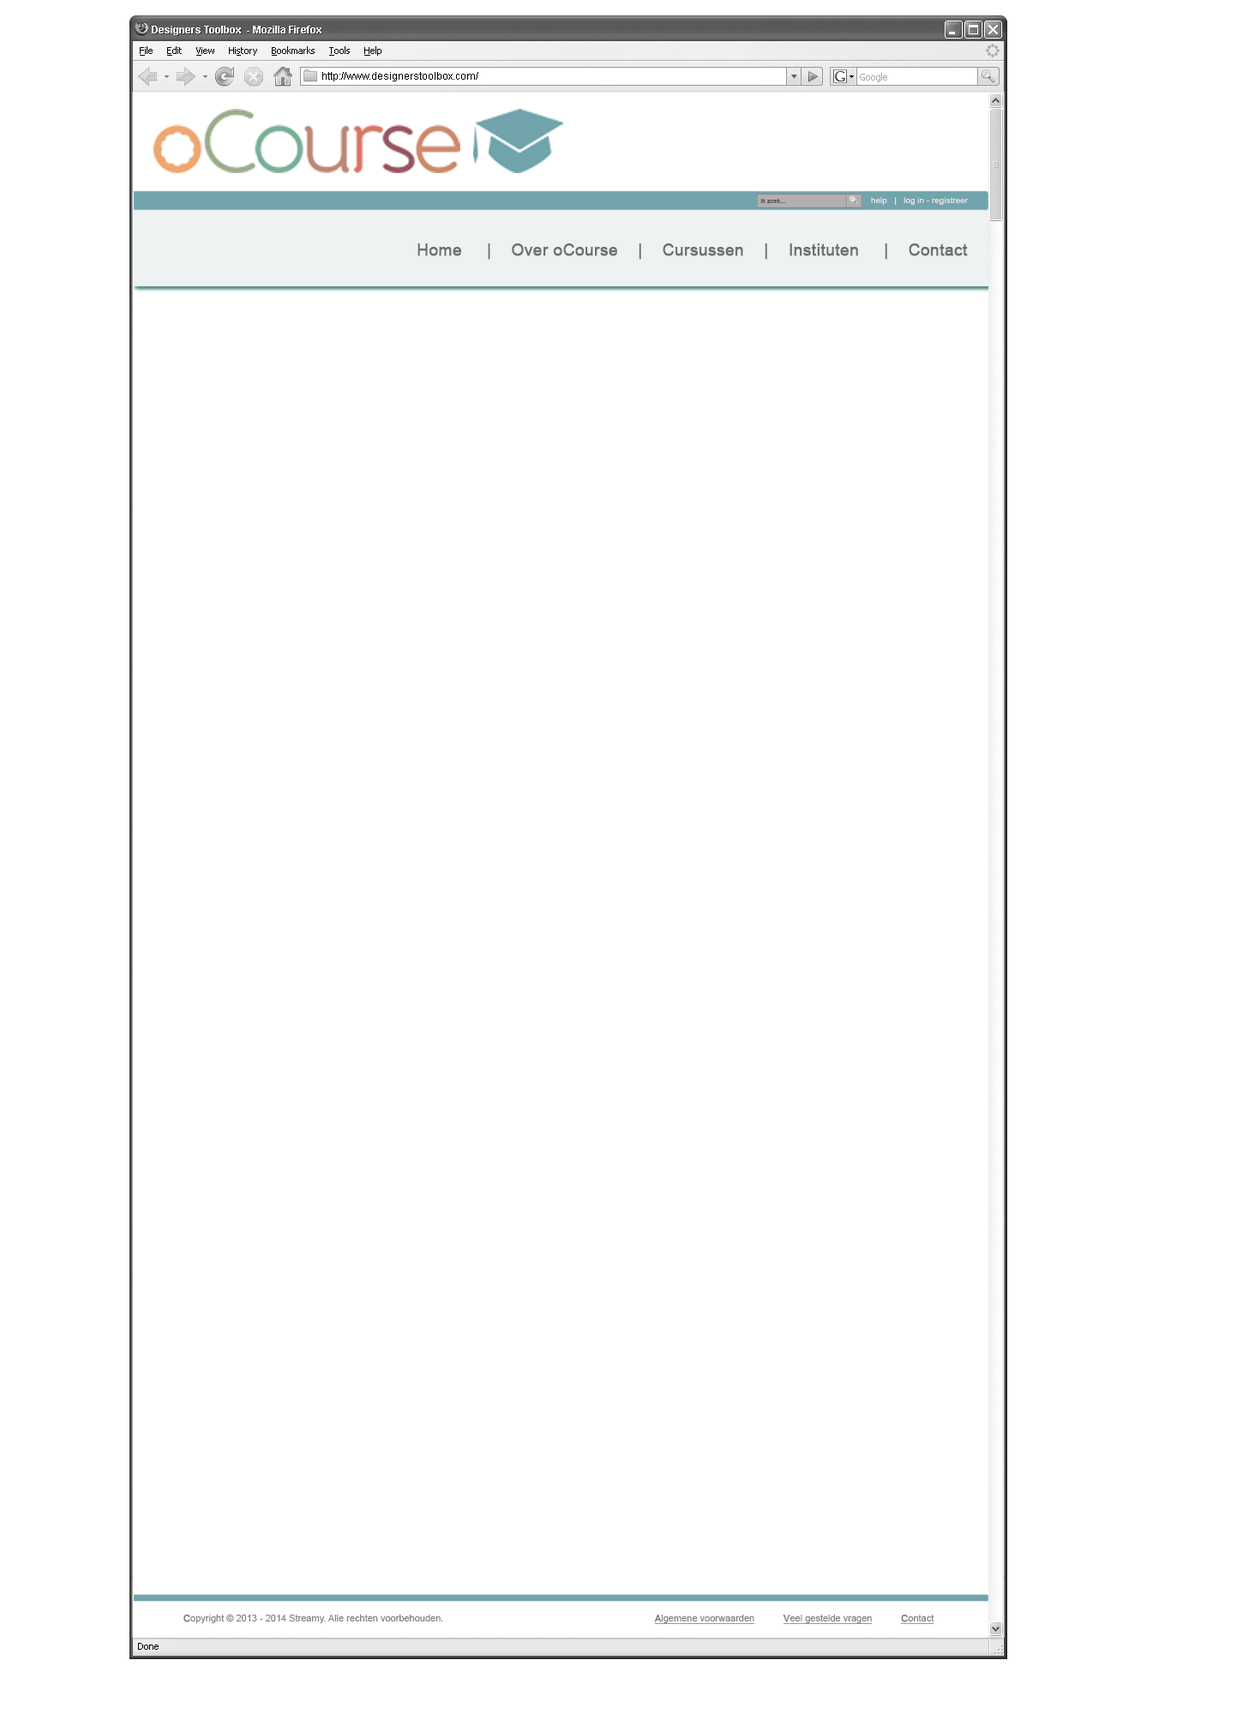
<style>
.page{position:relative;width:1243px;height:1714px;background:#ffffff}
.page>*{position:absolute;margin:0}
.t1{font:8.6px "ArialMT";color:#e7e2e2}
.t2{font:6.3px "ArialMT";color:#4d4c4c}
.t3{font:16.3px "ArialMT";color:#717070;font-weight:bold}
.t4{font:9.4px "ArialMT";color:#817f7f}
.t5{font:9.4px "ArialMT";color:#817f7f;font-weight:bold}
.t6{font:9.4px "ArialMT";color:#817f7f;font-weight:bold;text-decoration:underline}
.t7{font:9.4px "ArialMT";color:#817f7f;text-decoration:underline}
</style>
<div class="page">
<p class="t1" style="left:871px;top:197px;width:98px;height:8px">help   |   log in - registreer</p>
<p class="t2" style="left:760px;top:199px;width:25px;height:4px">Ik zoek...</p>
<p class="t3" style="left:417px;top:243px;width:551px;height:17px">Home     |    Over oCourse    |    Cursussen    |    Instituten     |    Contact</p>
<p class="t4" style="left:183px;top:1615px;width:751px;height:9px"><span class="t5">        C</span>opyright © 2013 - 2014 Streamy. Alle rechten voorbehouden.                                                 <span class="t6">A</span><span class="t7">lgemene voorwaarden           </span><span class="t6">V</span><span class="t7">eel gestelde vragen           </span><span class="t6">C</span><span class="t7">ontact</span></p>
</div>
